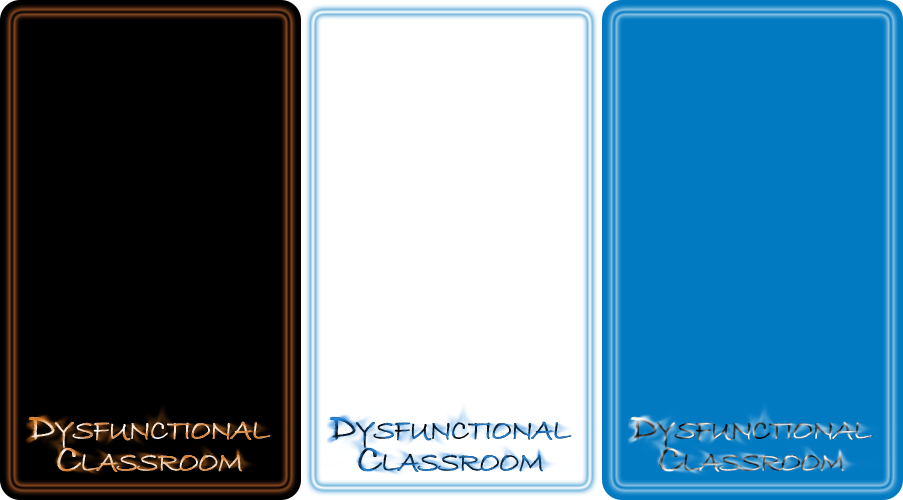
<style>
.page{position:relative;width:903px;height:500px;background:#ffffff}
.page>*{position:absolute;margin:0}
.t1{font:41.6px/32.1px "BradleyHandITC";letter-spacing:-0.05em;font-variant:small-caps;font-weight:bold}
</style>
<div class="page">
<p class="t1" style="left:29px;top:417px;width:242px;height:55px;text-align:center">Dysfunctional<br>Classroom</p>
<p class="t1" style="left:330px;top:417px;width:242px;height:55px;text-align:center">Dysfunctional<br>Classroom</p>
<p class="t1" style="left:631px;top:417px;width:242px;height:55px;text-align:center">Dysfunctional<br>Classroom</p>
</div>
